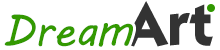
<style>
.page{position:relative;width:220px;height:50px;background:#ffffff}
.page>*{position:absolute;margin:0}
.t1{font:60px "KabelCTT-MediumBold";letter-spacing:0.01em;color:#333333}
.t2{font:45px "MVBoli";color:#339900}
.t3{font:45px "MVBoli";letter-spacing:-0.05em;color:#339900}
</style>
<div class="page">
<p class="t1" style="left:123px;top:1px;width:90px;height:46px">Art</p>
<p class="t2" style="left:4px;top:14px;width:129px;height:33px">Dre<span class="t3">am</span></p>
</div>
